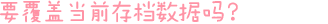
<style>
.page{position:relative;width:328px;height:24px;background:#ffffff}
.page>*{position:absolute;margin:0}
.t1{font:26px "¢è?";color:#ff93a5}
</style>
<div class="page">
<p class="t1" style="left:0px;top:0px;width:238px;height:23px">要覆盖当前存档数据吗？</p>
</div>
